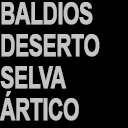
<style>
.page{position:relative;width:128px;height:128px;background:#000000}
.page>*{position:absolute;margin:0}
.t1{font:30.7px/32px "Arial-BoldMT";letter-spacing:-0.05em;color:#c4c4c4;font-weight:bold;scale:0.7 1}
</style>
<div class="page">
<p class="t1" style="left:0px;top:2px;width:100px;height:119px">BALDIOS<br>DESERTO<br>SELVA<br>ÁRTICO</p>
</div>
